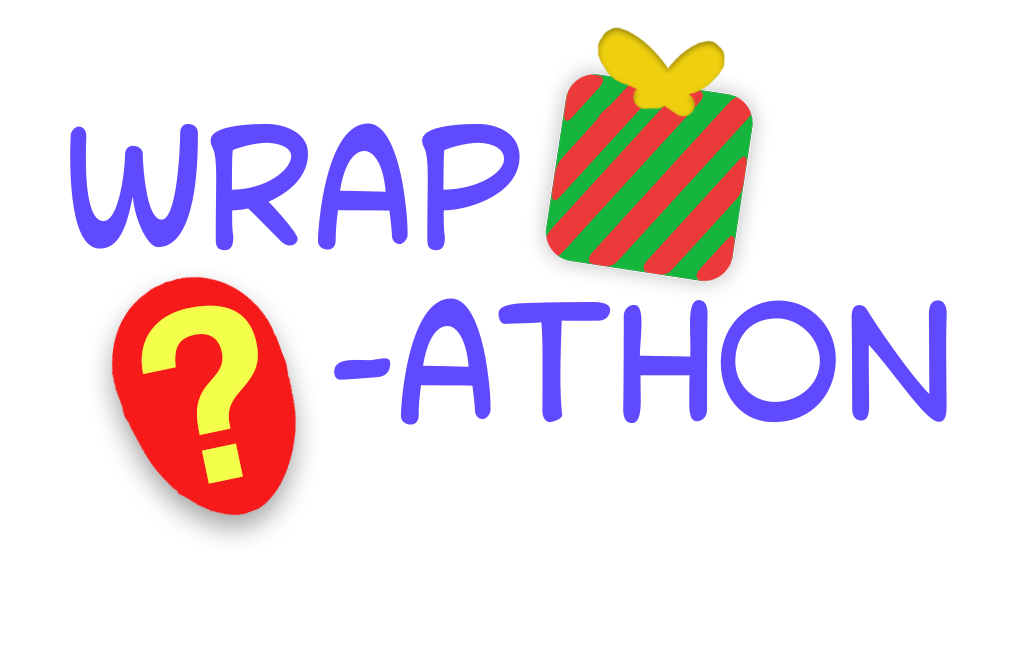
<style>
.page{position:relative;width:1024px;height:661px;background:#ffffff}
.page>*{position:absolute;margin:0}
.t1{font:145.8px "CollectorComic";color:#5f4aff;text-transform:uppercase}
.t2{font:256.3px "CoolveticaRg-Regular";color:#f3ff4a;text-transform:uppercase}
</style>
<div class="page">
<p class="t1" style="left:70px;top:123px;width:877px;height:302px;text-align:center">wrap<br>     -athon</p>
<p class="t2" style="left:141px;top:305px;width:117px;height:179px;rotate:-12deg">?</p>
</div>
